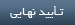
<style>
.page{position:relative;width:75px;height:25px}
.page>*{position:absolute;margin:0}
.t1{font:12px "BYekan";color:#ffffff}
</style>
<div class="page">
<p class="t1" style="left:10px;top:6px;width:54px;height:12px">تـأیید نهـایی</p>
</div>
